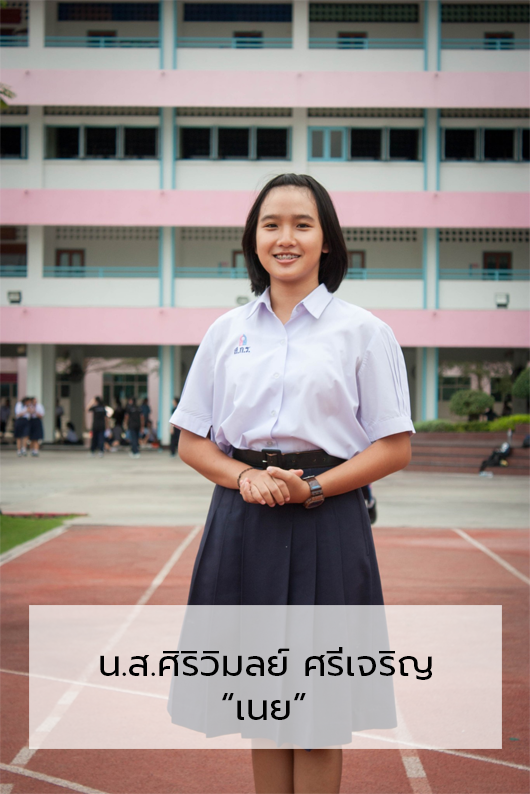
<style>
.page{position:relative;width:530px;height:794px}
.page>*{position:absolute;margin:0}
.t1{font:36.7px "Prompt-Regular";color:#000000}
</style>
<div class="page">
<p class="t1" style="left:100px;top:647px;width:332px;height:73px">น.ส.ศิริวิมลย์ ศรีเจริญ<br>         “เนย”</p>
</div>
